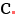
<style>
.page{position:relative;width:16px;height:16px;background:#ffffff}
.page>*{position:absolute;margin:0}
.t1{font:16px "Bitter-Regular";color:#000000}
</style>
<div class="page">
<p class="t1" style="left:1px;top:3px;width:10px;height:11px">C</p>
</div>
